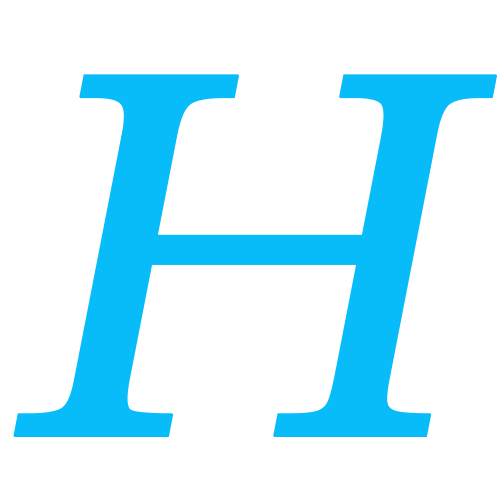
<style>
.page{position:relative;width:500px;height:500px;background:#ffffff}
.page>*{position:absolute;margin:0}
.t1{font:529.5px "STZhongsong";color:#07bcf8;font-weight:bold;font-style:italic;scale:1.1 1}
</style>
<div class="page">
<p class="t1" style="left:13px;top:74px;width:485px;height:363px">H</p>
</div>
